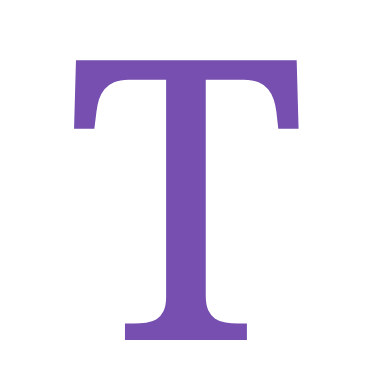
<style>
.page{position:relative;width:375px;height:376px;background:#ffffff}
.page>*{position:absolute;margin:0}
.t1{font:392px "NotoSerif";color:#764fb0}
</style>
<div class="page">
<p class="t1" style="left:74px;top:60px;width:225px;height:280px">T</p>
</div>
